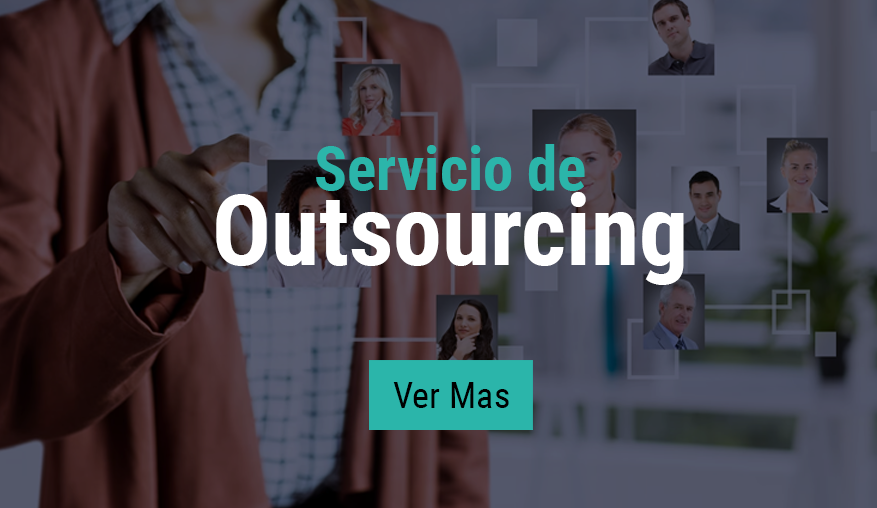
<style>
.page{position:relative;width:877px;height:508px}
.page>*{position:absolute;margin:0}
.t1{font:60.9px "RobotoCondensed-Bold";color:#2bb5aa}
.t2{font:97.6px "RobotoCondensed-Bold";color:#ffffff}
.t3{font:36.4px "RobotoCondensed-Regular";color:#000000}
</style>
<div class="page">
<p class="t1" style="left:316px;top:144px;width:269px;height:47px">Servicio de</p>
<p class="t2" style="left:216px;top:192px;width:468px;height:93px">Outsourcing</p>
<p class="t3" style="left:393px;top:382px;width:116px;height:26px">Ver Mas</p>
</div>
